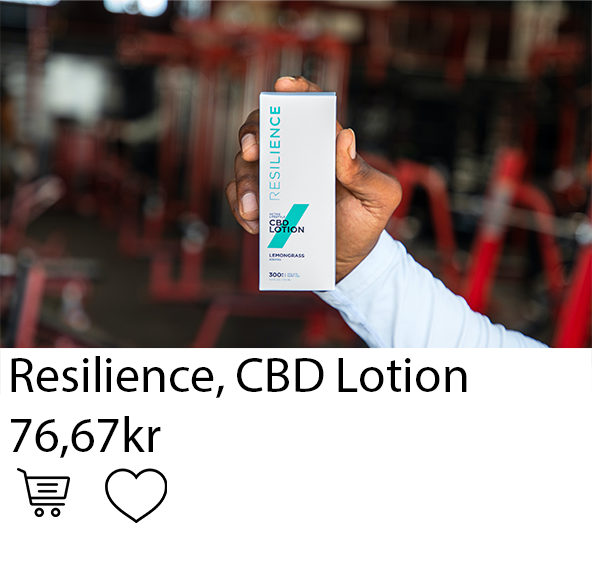
<style>
.page{position:relative;width:592px;height:567px;background:#ffffff}
.page>*{position:absolute;margin:0}
.t1{font:50px "MyriadPro-Regular";color:#000000}
</style>
<div class="page">
<p class="t1" style="left:11px;top:356px;width:456px;height:102px">Resilience, CBD Lotion<br>76,67kr</p>
</div>
